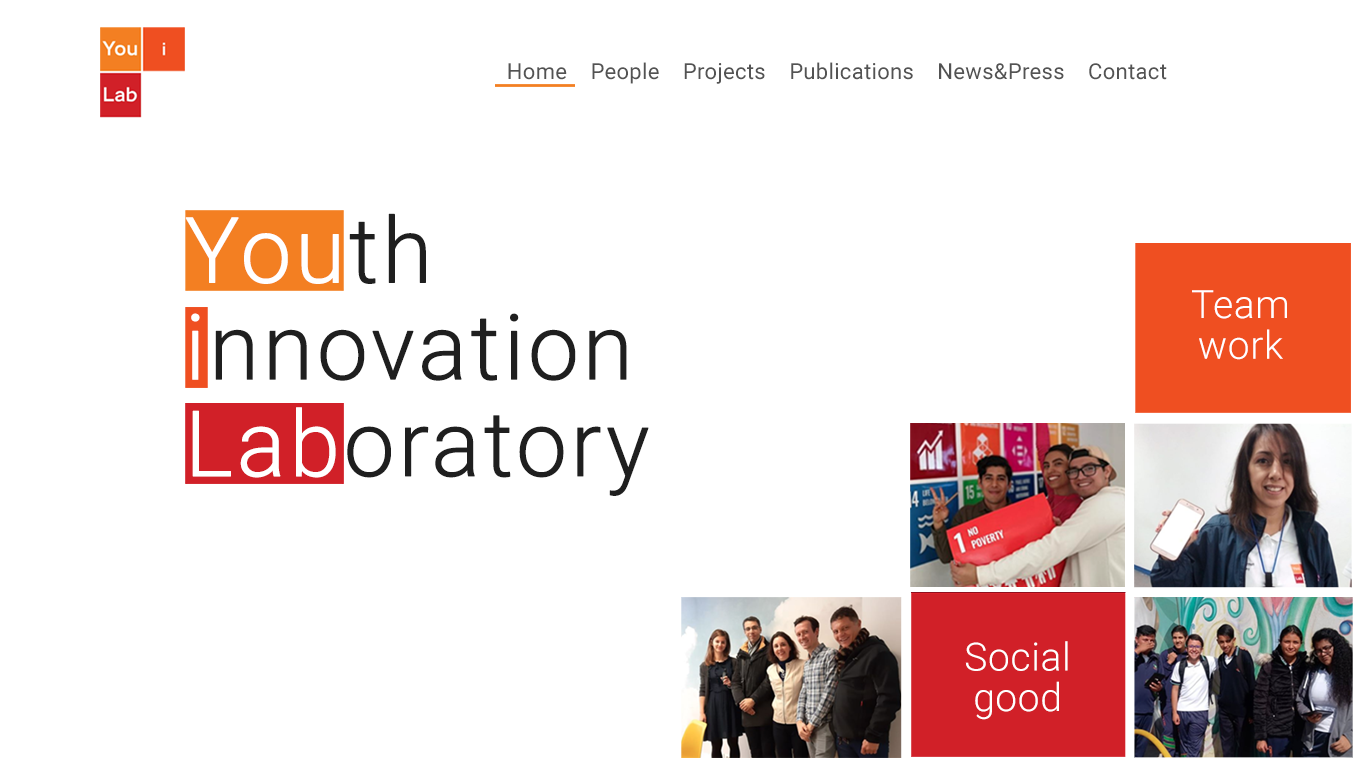
<style>
.page{position:relative;width:1366px;height:768px;background:#ffffff}
.page>*{position:absolute;margin:0}
.t1{font:22px "Roboto-Regular";letter-spacing:0.015em;color:#535353}
.t2{font:90.9px/96.7px "Roboto-Light";letter-spacing:0.015em;color:#1f1f1f;font-weight:bold}
.t3{font:90.9px/96.7px "Roboto-Light";letter-spacing:0.015em;color:#ffffff;font-weight:bold}
.t4{font:39px/40.5px "Roboto-Light";letter-spacing:0.015em;color:#ffffff}
</style>
<div class="page">
<p class="t1" style="left:508px;top:62px;width:659px;height:22px">Home    People    Projects    Publications    News&amp;Press    Contact</p>
<p class="t2" style="left:185px;top:213px;width:464px;height:283px"><span class="t3">You</span>th<br><span class="t3">i</span>nnovation<br><span class="t3">Lab</span>oratory</p>
<p class="t4" style="left:1192px;top:290px;width:95px;height:70px;text-align:center">Team<br>work</p>
<p class="t4" style="left:965px;top:641px;width:103px;height:79px;text-align:center">Social<br>good</p>
</div>
